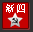
<style>
.page{position:relative;width:33px;height:32px;background:#c50000}
.page>*{position:absolute;margin:0}
.t1{font:10.4px "SimSun";color:#ffffff}
</style>
<div class="page">
<p class="t1" style="left:6px;top:4px;width:19px;height:9px">新四</p>
</div>
